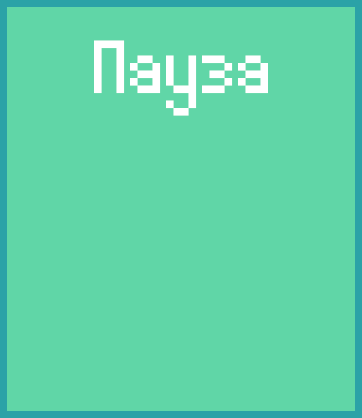
<style>
.page{position:relative;width:362px;height:418px;background:#60d6a7}
.page>*{position:absolute;margin:0}
.t1{font:120px "Thintel";color:#ffffff}
</style>
<div class="page">
<p class="t1" style="left:94px;top:40px;width:174px;height:76px">Пауза</p>
</div>
